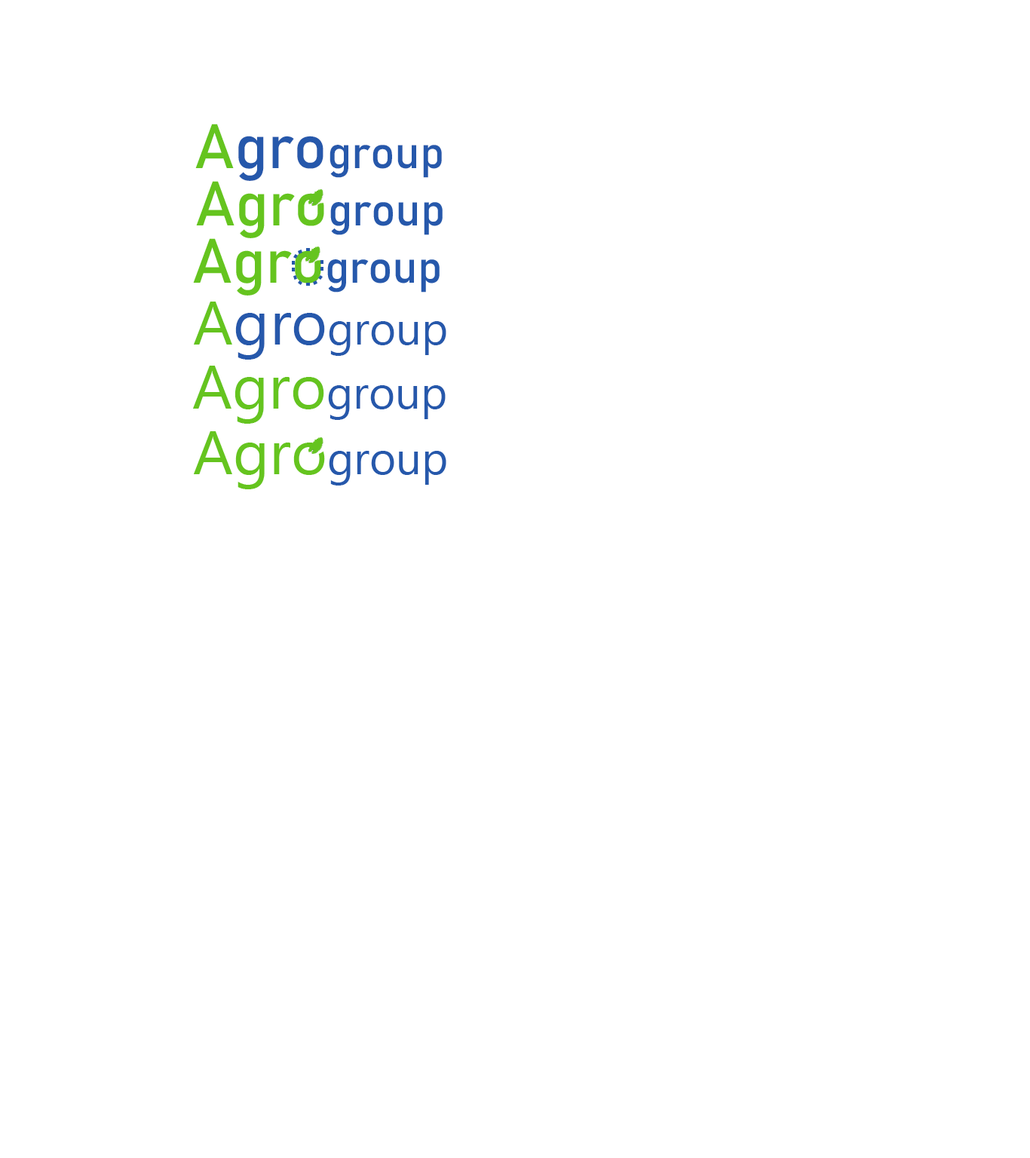
<style>
.page{position:relative;width:1030px;height:1158px;background:#ffffff}
.page>*{position:absolute;margin:0}
.t1{font:45.2px "Bahnschrift";color:#2658ab}
.t2{font:61.8px "Bahnschrift";color:#65c41f}
.t3{font:61.8px "Bahnschrift";color:#2658ab}
.t4{font:45.2px "MicrosoftTaiLe";color:#2658ab}
.t5{font:61.8px "MicrosoftTaiLe";color:#65c41f}
.t6{font:61.8px "MicrosoftTaiLe";color:#2658ab}
</style>
<div class="page">
<p class="t1" style="left:195px;top:124px;width:247px;height:57px"><span class="t2">A</span><span class="t3">gro</span>group</p>
<p class="t4" style="left:194px;top:302px;width:252px;height:58px"><span class="t5">A</span><span class="t6">gro</span>group</p>
<p class="t4" style="left:193px;top:366px;width:253px;height:58px"><span class="t5">Agro</span>group</p>
</div>
